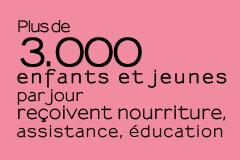
<style>
.page{position:relative;width:240px;height:160px;background:#f18ca0}
.page>*{position:absolute;margin:0}
.t1{font:17.5px/18px "Sansumi-Bold";letter-spacing:0.02em;color:#000000;scale:0.93 1}
.t2{font:24px/25px "Sansumi-Bold";letter-spacing:-0.04em;color:#000000}
.t3{font:15.4px/31px "Sansumi-Bold";letter-spacing:-0.07em;color:#000000;scale:0.93 1}
.t4{font:38.2px/34px "Sansumi-Bold";letter-spacing:-0.06em;color:#000000;font-weight:bold;scale:0.93 1}
.t5{font:17px/17px "Sansumi-Bold";letter-spacing:0.155em;color:#000000;font-weight:bold;scale:0.93 1}
.t6{font:15.4px/18px "Sansumi-Bold";letter-spacing:0.02em;color:#000000;scale:0.93 1}
.t7{font:15.4px/18px "Sansumi-Bold";letter-spacing:0.085em;color:#000000;scale:0.93 1}
</style>
<div class="page">
<p class="t1" style="left:17px;top:20px;width:210px;height:119px"><span class="t2"><br></span><span class="t3">Plus de<br></span><span class="t4">3.000<br></span><span class="t5">enfants et jeunes<br></span><span class="t6">par jour<br></span>reçoivent nourriture,<br><span class="t7">assistance, éducation</span></p>
</div>
